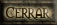
<style>
.page{position:relative;width:57px;height:25px}
.page>*{position:absolute;margin:0}
.t1{font:15px "Morpheus"}
</style>
<div class="page">
<p class="t1" style="left:5px;top:7px;width:49px;height:13px">Cerrar</p>
</div>
